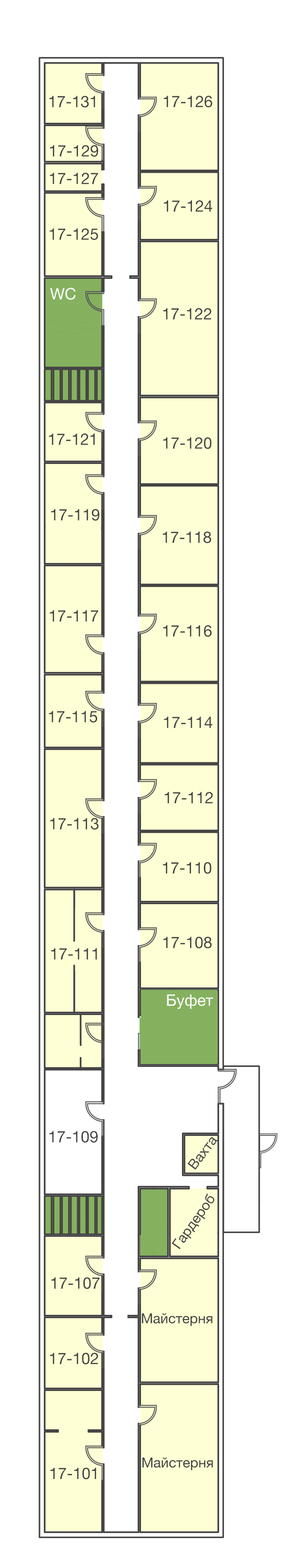
<style>
.page{position:relative;width:302px;height:1568px;background:#ffffff}
.page>*{position:absolute;margin:0}
.t1{font:15.9px "HelveticaNeue";color:#444444}
.t2{font:15.9px "HelveticaNeue";color:#ffffff}
.t3{font:13.9px "HelveticaNeue";color:#444444}
</style>
<div class="page">
<p class="t1" style="left:49px;top:96px;width:46px;height:12px">17-131</p>
<p class="t1" style="left:163px;top:96px;width:49px;height:12px">17-126</p>
<p class="t1" style="left:49px;top:145px;width:49px;height:12px">17-129</p>
<p class="t1" style="left:49px;top:173px;width:49px;height:11px">17-127</p>
<p class="t1" style="left:164px;top:200px;width:48px;height:12px">17-124</p>
<p class="t1" style="left:49px;top:228px;width:49px;height:12px">17-125</p>
<p class="t2" style="left:50px;top:287px;width:26px;height:13px">WC</p>
<p class="t1" style="left:163px;top:308px;width:48px;height:12px">17-122</p>
<p class="t1" style="left:49px;top:434px;width:46px;height:11px">17-121</p>
<p class="t1" style="left:163px;top:437px;width:48px;height:12px">17-120</p>
<p class="t1" style="left:51px;top:509px;width:48px;height:12px">17-119</p>
<p class="t1" style="left:162px;top:532px;width:49px;height:11px">17-118</p>
<p class="t1" style="left:49px;top:610px;width:49px;height:11px">17-117</p>
<p class="t1" style="left:163px;top:625px;width:49px;height:12px">17-116</p>
<p class="t1" style="left:49px;top:711px;width:48px;height:12px">17-115</p>
<p class="t1" style="left:164px;top:717px;width:48px;height:11px">17-114</p>
<p class="t1" style="left:164px;top:792px;width:49px;height:11px">17-112</p>
<p class="t1" style="left:50px;top:818px;width:49px;height:12px">17-113</p>
<p class="t1" style="left:163px;top:862px;width:48px;height:12px">17-110</p>
<p class="t1" style="left:163px;top:937px;width:49px;height:11px">17-108</p>
<p class="t1" style="left:51px;top:948px;width:46px;height:12px">17-111</p>
<p class="t2" style="left:167px;top:994px;width:46px;height:15px">Буфет</p>
<p class="t1" style="left:49px;top:1131px;width:49px;height:12px">17-109</p>
<p class="t3" style="left:187px;top:1137px;width:30px;height:33px;rotate:-53deg">Вахта</p>
<p class="t3" style="left:171px;top:1193px;width:43px;height:56px;rotate:-55deg">Гардероб</p>
<p class="t1" style="left:51px;top:1277px;width:48px;height:12px">17-107</p>
<p class="t3" style="left:142px;top:1313px;width:70px;height:13px">Майстерня</p>
<p class="t1" style="left:49px;top:1352px;width:49px;height:12px">17-102</p>
<p class="t3" style="left:142px;top:1457px;width:71px;height:13px">Майстерня</p>
<p class="t1" style="left:50px;top:1468px;width:46px;height:11px">17-101</p>
</div>
